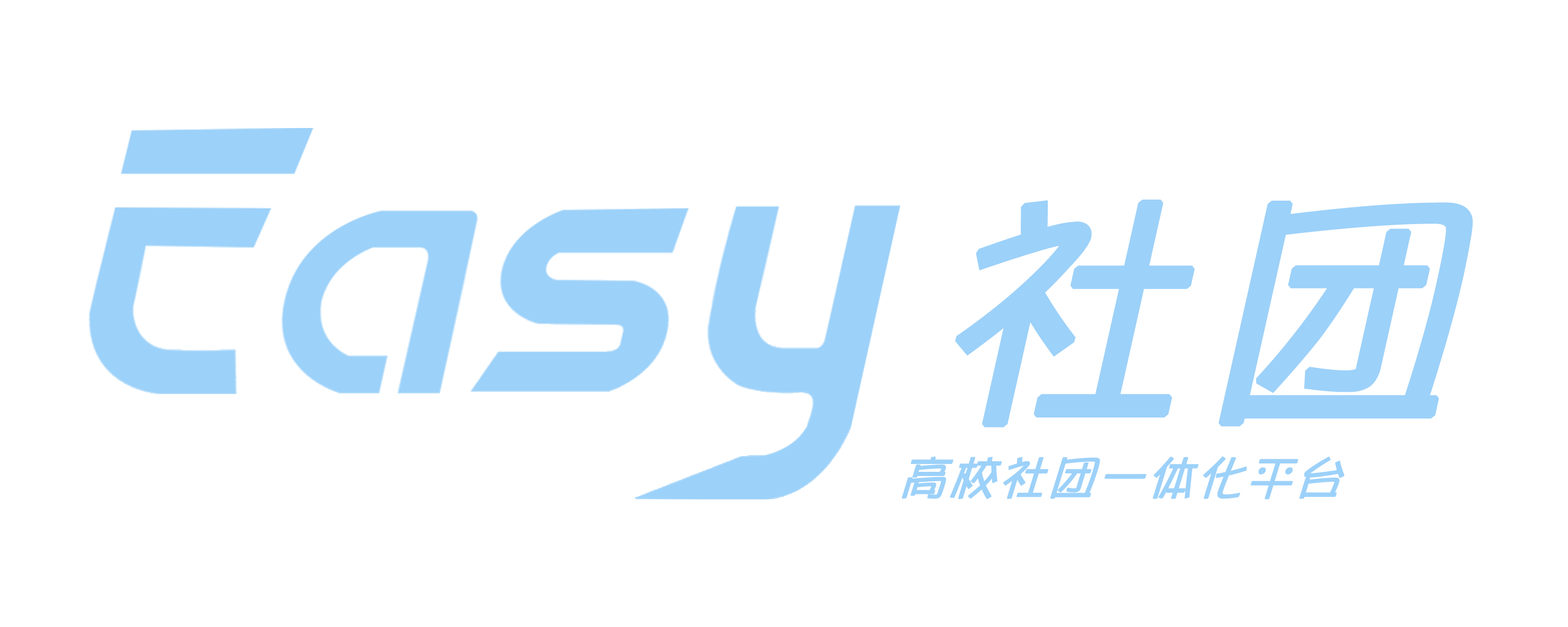
<style>
.page{position:relative;width:1568px;height:627px;background:#ffffff}
.page>*{position:absolute;margin:0}
.t1{font:249.9px "DFPOP1W5";letter-spacing:0.08em;color:#9cd1f9;text-transform:uppercase;font-weight:bold}
.t2{font:46.7px "DFPOP1W5";letter-spacing:0.08em;color:#9cd1f9;text-transform:uppercase;font-weight:bold;scale:0.96 1}
</style>
<div class="page">
<p class="t1" style="left:955px;top:200px;width:518px;height:228px">社团</p>
<p class="t2" style="left:902px;top:456px;width:443px;height:44px">高校社团一体化平台</p>
</div>
